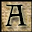
<style>
.page{position:relative;width:32px;height:32px}
.page>*{position:absolute;margin:0}
.t1{font:30px "GoudyMedieval-Alternate";color:#000000}
</style>
<div class="page">
<p class="t1" style="left:5px;top:4px;width:22px;height:23px">A</p>
</div>
